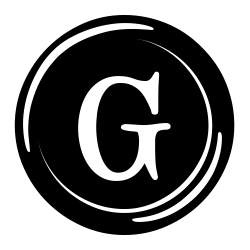
<style>
.page{position:relative;width:250px;height:250px;background:#ffffff}
.page>*{position:absolute;margin:0}
.t1{font:293.2px "TypeKeysFilled";letter-spacing:0.02em;color:#000000}
</style>
<div class="page">
<p class="t1" style="left:14px;top:15px;width:221px;height:220px">g</p>
</div>
